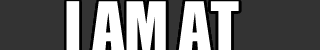
<style>
.page{position:relative;width:320px;height:50px;background:#333333}
.page>*{position:absolute;margin:0}
.t1{font:61.8px "Impact";color:#ffffff}
</style>
<div class="page">
<p class="t1" style="left:66px;top:1px;width:173px;height:49px">I AM AT</p>
</div>
